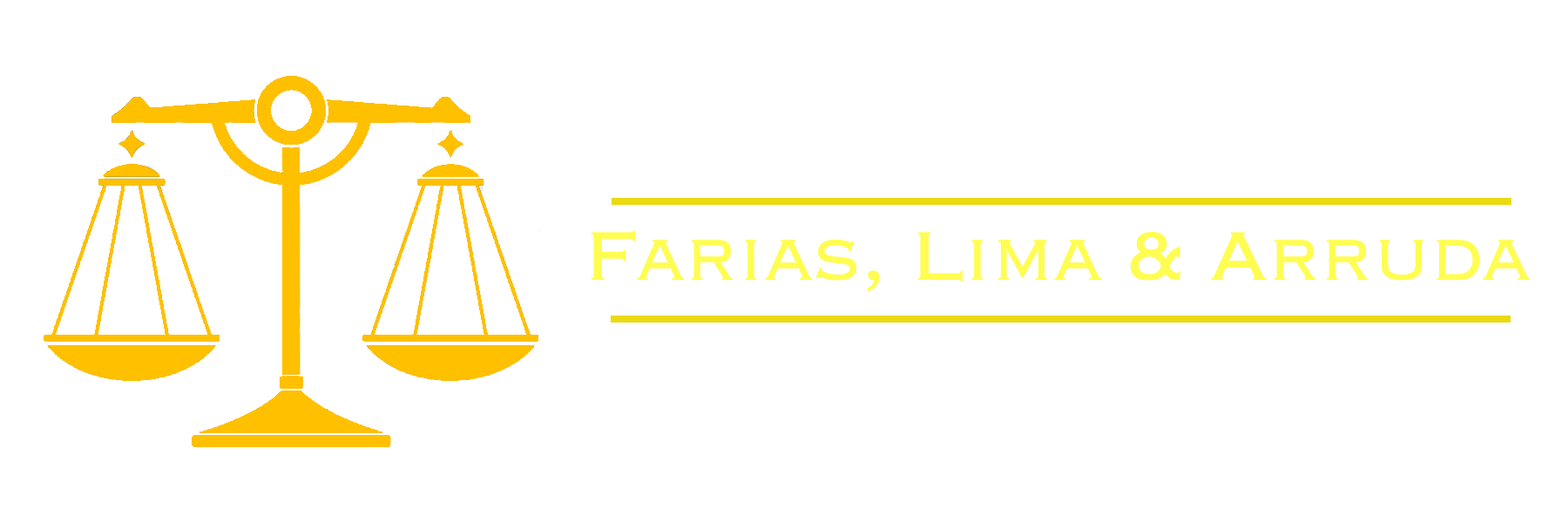
<style>
.page{position:relative;width:1568px;height:523px;background:#ffffff}
.page>*{position:absolute;margin:0}
.t1{font:88.9px "Copperplate-Light";letter-spacing:-0.02em;color:#fffd50}
</style>
<div class="page">
<p class="t1" style="left:591px;top:230px;width:940px;height:61px">Farias, Lima &amp; Arruda</p>
</div>
